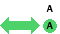
<style>
.page{position:relative;width:60px;height:34px;background:#ffffff}
.page>*{position:absolute;margin:0}
.t1{font:10px "FranklinGothic-Medium";color:#000000}
</style>
<div class="page">
<p class="t1" style="left:46px;top:5px;width:7px;height:7px">A</p>
<p class="t1" style="left:46px;top:22px;width:7px;height:7px">A</p>
</div>
